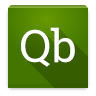
<style>
.page{position:relative;width:96px;height:96px;background:#ffffff}
.page>*{position:absolute;margin:0}
.t1{font:45px "RobotoSlab-Regular";color:#ffffff}
</style>
<div class="page">
<p class="t1" style="left:21px;top:27px;width:54px;height:40px">Qb</p>
</div>
